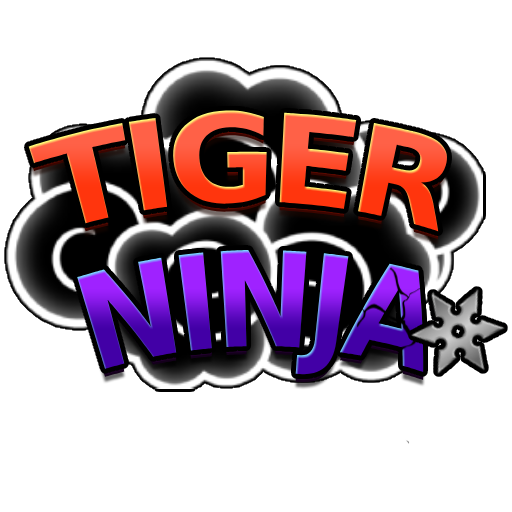
<style>
.page{position:relative;width:512px;height:512px;background:#ffffff}
.page>*{position:absolute;margin:0}
.t1{font:123px "AsketCondensed-ExtraBold";letter-spacing:-0.05em;text-transform:uppercase}
.t2{font:131.7px "AsketCondensed-ExtraBold";letter-spacing:-0.05em;text-transform:uppercase;scale:0.83 1}
</style>
<div class="page">
<p class="t1" style="left:28px;top:110px;width:420px;height:122px">TIGER</p>
<p class="t2" style="left:77px;top:250px;width:347px;height:125px">NINJA</p>
</div>
